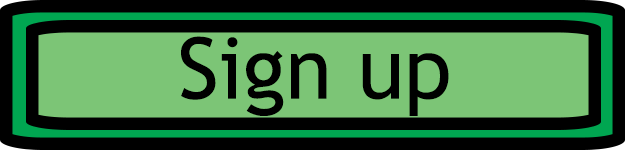
<style>
.page{position:relative;width:625px;height:150px;background:#7cc576}
.page>*{position:absolute;margin:0}
.t1{font:85px "TrebuchetMS";color:#000000}
</style>
<div class="page">
<p class="t1" style="left:181px;top:36px;width:268px;height:80px">Sign up</p>
</div>
